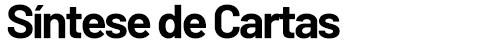
<style>
.page{position:relative;width:500px;height:50px;background:#ffffff}
.page>*{position:absolute;margin:0}
.t1{font:48px "Barlow-Bold";letter-spacing:-0.05em;color:#000000}
</style>
<div class="page">
<p class="t1" style="left:7px;top:4px;width:333px;height:35px">Síntese de Cartas</p>
</div>
